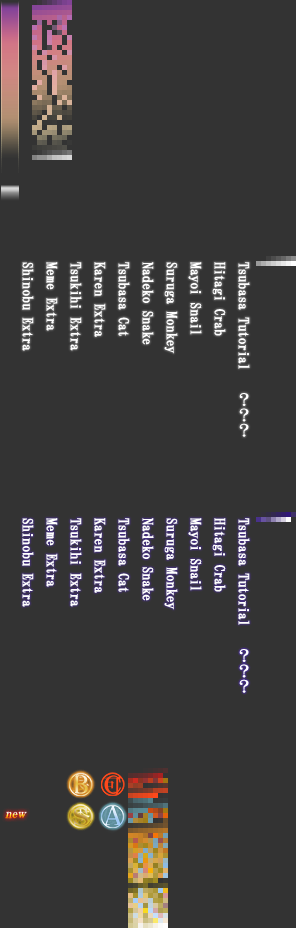
<style>
.page{position:relative;width:296px;height:928px;background:#333333}
.page>*{position:absolute;margin:0}
.t1{font:14px/24px "HGMinchoB";letter-spacing:-0.025em;color:#ffffff;font-weight:bold}
.t2{font:14px "HGMinchoB";letter-spacing:0.1em;color:#ffffff;font-weight:bold}
.t3{font:14px/30px "HGMinchoB";letter-spacing:0.1em;color:#ffffff;font-weight:bold}
</style>
<div class="page">
<p class="t1" style="left:22px;top:262px;width:228px;height:107px;rotate:90deg">Tsubasa Tutorial<br>Hitagi Crab<br>Mayoi Snail<br>Suruga Monkey<br>Nadeko Snake<br>Tsubasa Cat<br>Karen Extra<br>Tsukihi Extra<br>Meme Extra<br>Shinobu Extra</p>
<p class="t2" style="left:239px;top:393px;width:10px;height:44px">？？？</p>
<p class="t1" style="left:22px;top:518px;width:228px;height:107px;rotate:90deg">Tsubasa Tutorial<br>Hitagi Crab<br>Mayoi Snail<br>Suruga Monkey<br>Nadeko Snake<br>Tsubasa Cat<br>Karen Extra<br>Tsukihi Extra<br>Meme Extra<br>Shinobu Extra</p>
<p class="t3" style="left:239px;top:649px;width:10px;height:44px">？？？</p>
</div>
